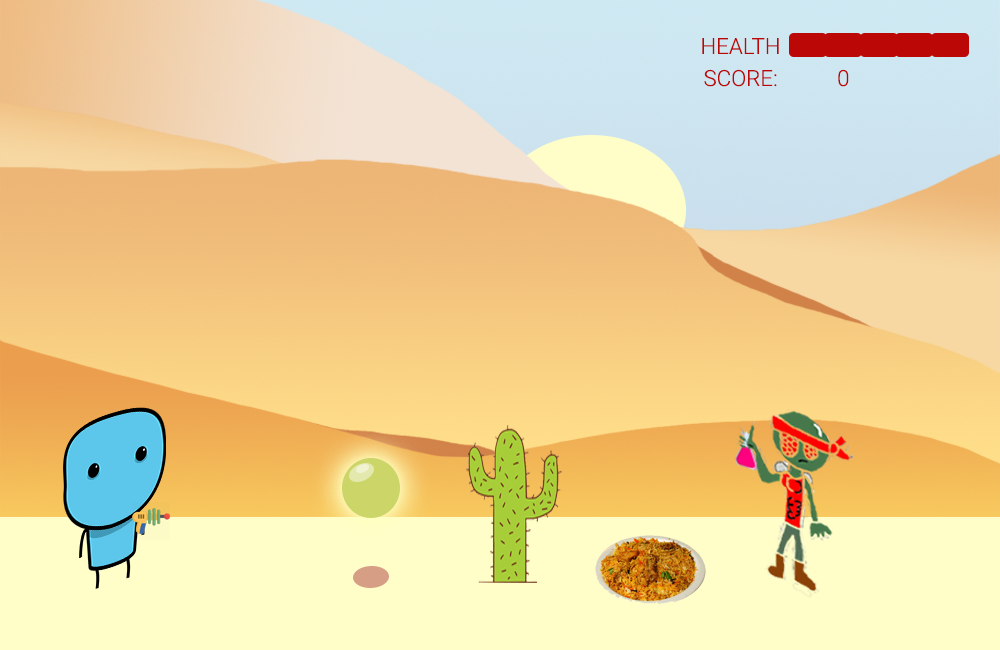
<style>
.page{position:relative;width:1000px;height:650px}
.page>*{position:absolute;margin:0}
.t1{font:22.2px "Roboto-Light";color:#bc0707}
</style>
<div class="page">
<p class="t1" style="left:702px;top:38px;width:77px;height:16px">HEALTH</p>
<p class="t1" style="left:704px;top:69px;width:145px;height:18px">SCORE:    0</p>
</div>
